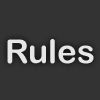
<style>
.page{position:relative;width:100px;height:100px;background:#333333}
.page>*{position:absolute;margin:0}
.t1{font:32.9px "ArialRoundedMTBold";color:#e6e6e6}
</style>
<div class="page">
<p class="t1" style="left:7px;top:39px;width:87px;height:25px">Rules</p>
</div>
